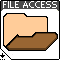
<style>
.page{position:relative;width:60px;height:60px;background:#ffffff}
.page>*{position:absolute;margin:0}
.t1{font:8px "Photoshop Small";color:#ffffff}
</style>
<div class="page">
<p class="t1" style="left:3px;top:1px;width:54px;height:7px">FILE ACCESS</p>
</div>
